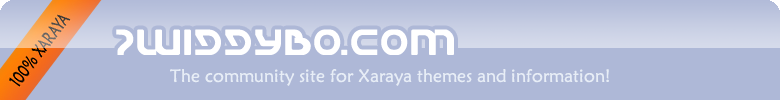
<style>
.page{position:relative;width:780px;height:100px;background:#aeb8d7}
.page>*{position:absolute;margin:0}
.t1{font:36px "UniversalJack";color:#ffffff}
.t2{font:18px "MaiandraGD-Regular";color:#e7edf6}
</style>
<div class="page">
<p class="t1" style="left:116px;top:29px;width:338px;height:26px">ZWIGGYBO.COM</p>
<p class="t2" style="left:170px;top:69px;width:439px;height:17px">The community site for Xaraya themes and information!</p>
</div>
